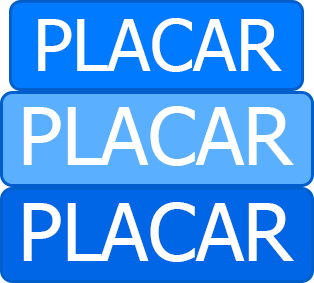
<style>
.page{position:relative;width:314px;height:283px;background:#5ab0ff}
.page>*{position:absolute;margin:0}
.t1{font:72px "Tahoma";color:#ffffff}
.t2{font:79.5px "Tahoma";color:#ffffff}
</style>
<div class="page">
<p class="t1" style="left:38px;top:18px;width:244px;height:54px">PLACAR</p>
<p class="t2" style="left:23px;top:106px;width:271px;height:60px">PLACAR</p>
<p class="t2" style="left:23px;top:202px;width:271px;height:60px">PLACAR</p>
</div>
